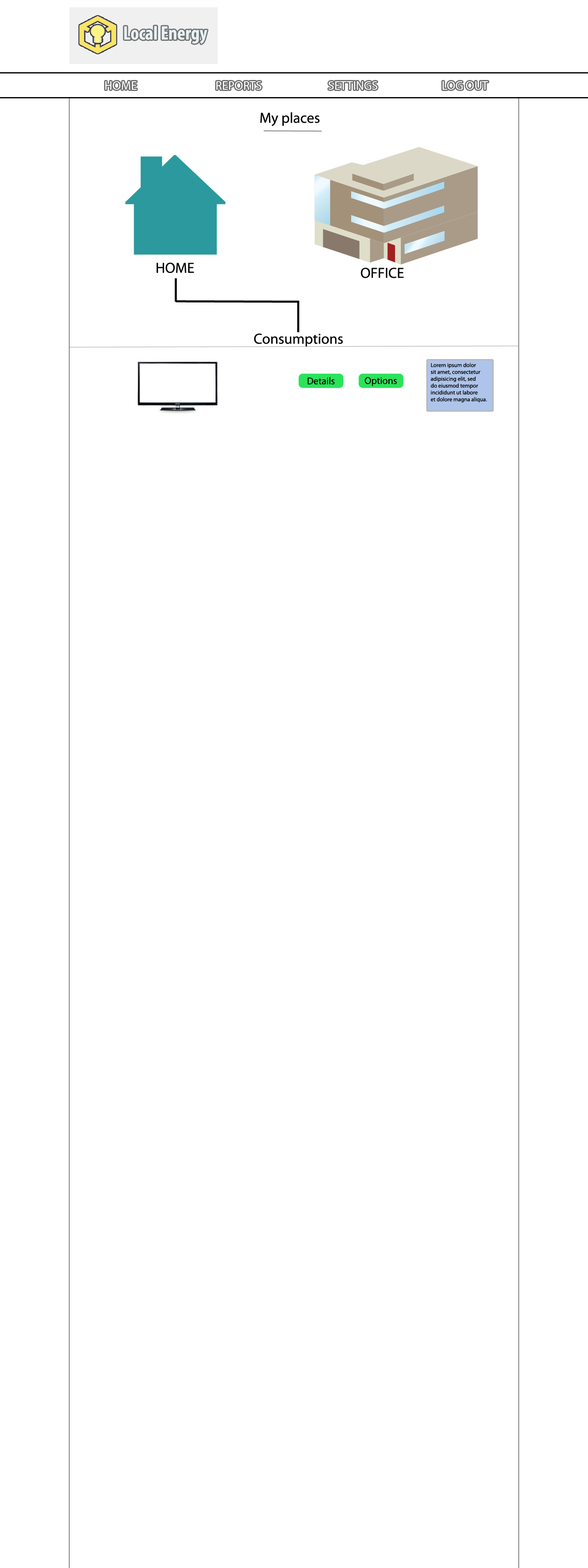
<style>
.page{position:relative;width:588px;height:1568px;background:#ffffff}
.page>*{position:absolute;margin:0}
.t1{font:19.6px "MyriadPro-BoldCond";color:#e8f1f5}
.t2{font:14.7px "MyriadPro-Regular";color:#000000}
.t3{font:5.7px "MyriadPro-Regular";color:#000000}
.t4{font:9.8px "MyriadPro-Regular";color:#030101}
</style>
<div class="page">
<p class="t1" style="left:124px;top:26px;width:83px;height:18px">Local Energy</p>
<p class="t2" style="left:260px;top:112px;width:59px;height:14px">My places</p>
<p class="t2" style="left:156px;top:262px;width:38px;height:11px">HOME</p>
<p class="t2" style="left:360px;top:268px;width:44px;height:10px">OFFICE</p>
<p class="t2" style="left:254px;top:333px;width:89px;height:14px">Consumptions</p>
<p class="t3" style="left:430px;top:363px;width:57px;height:40px">Lorem ipsum dolor <br>sit amet, consectetur <br>adipisicing elit, sed <br>do eiusmod tempor <br>incididunt ut labore <br>et dolore magna aliqua.</p>
<p class="t4" style="left:307px;top:377px;width:28px;height:7px">Details</p>
<p class="t4" style="left:364px;top:377px;width:33px;height:9px">Options</p>
</div>
